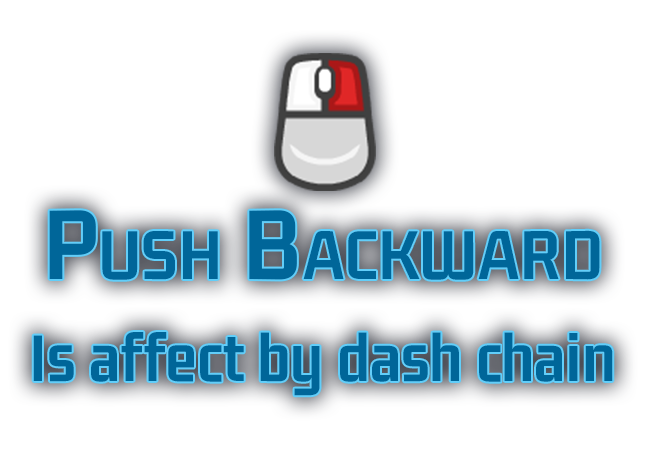
<style>
.page{position:relative;width:650px;height:450px;background:#ffffff}
.page>*{position:absolute;margin:0}
.t1{font:107.5px "GemunuLibre-Bold";color:#006699;font-variant:small-caps;font-weight:bold}
.t2{font:71.7px "GemunuLibre-Bold";color:#006699;font-weight:bold}
</style>
<div class="page">
<p class="t1" style="left:49px;top:210px;width:551px;height:70px">Push Backward</p>
<p class="t2" style="left:33px;top:332px;width:580px;height:64px">Is affect by dash chain</p>
</div>
